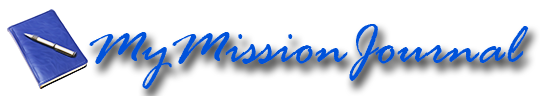
<style>
.page{position:relative;width:540px;height:96px;background:#ffffff}
.page>*{position:absolute;margin:0}
.t1{font:60px "RageItalic";color:#0052da}
</style>
<div class="page">
<p class="t1" style="left:89px;top:24px;width:440px;height:65px">MyMissionJournal</p>
</div>
